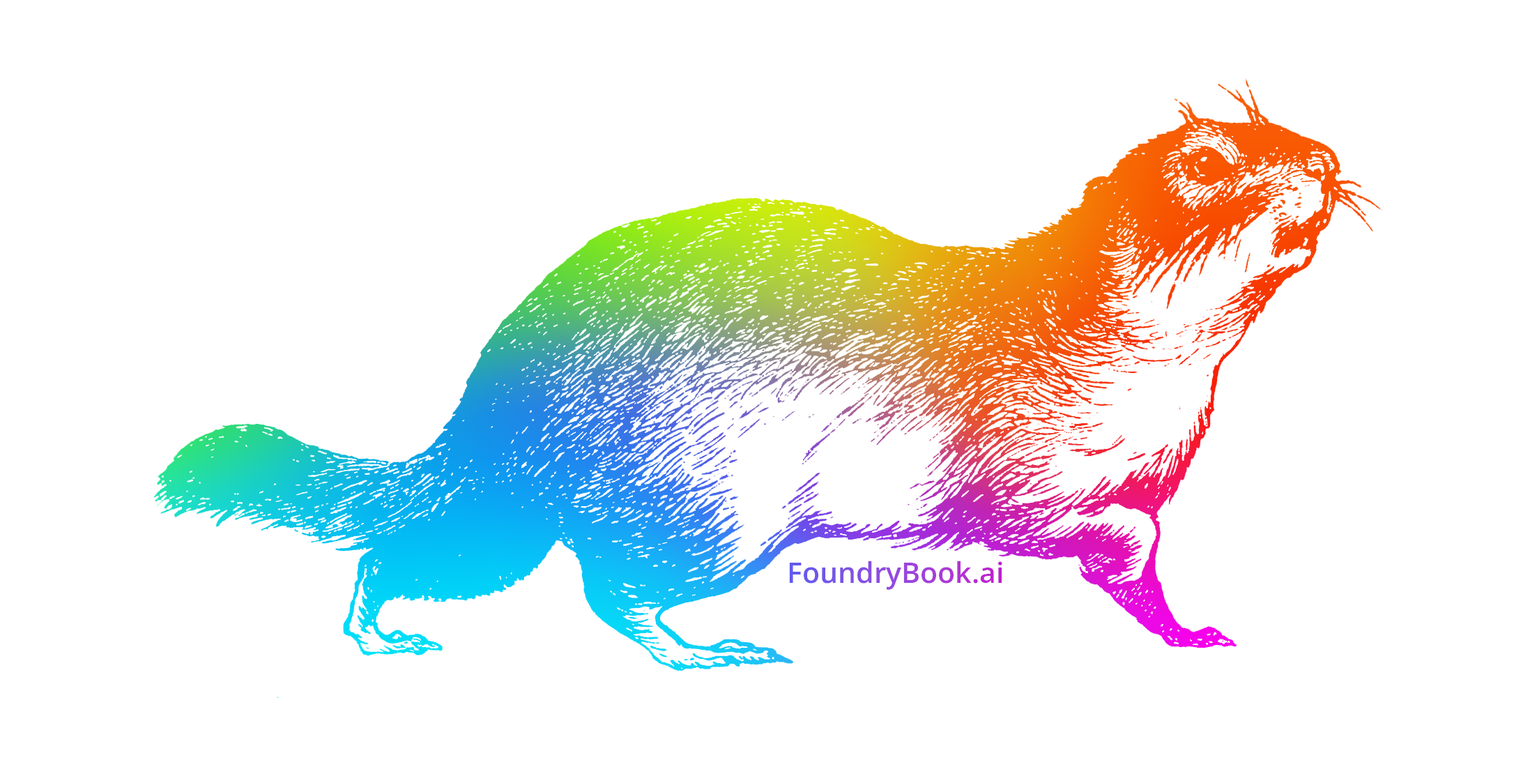
<style>
.page{position:relative;width:1537px;height:776px;background:#ffffff}
.page>*{position:absolute;margin:0}
.t1{font:28.6px "OpenSansRoman-SemiBold"}
</style>
<div class="page">
<p class="t1" style="left:789px;top:560px;width:213px;height:30px">FoundryBook.ai</p>
</div>
